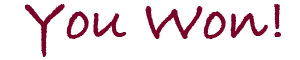
<style>
.page{position:relative;width:300px;height:60px;background:#ffffff}
.page>*{position:absolute;margin:0}
.t1{font:60px "BradleyHandITCTT-Bold";color:#7a0026}
</style>
<div class="page">
<p class="t1" style="left:24px;top:4px;width:257px;height:53px">You Won!</p>
</div>
